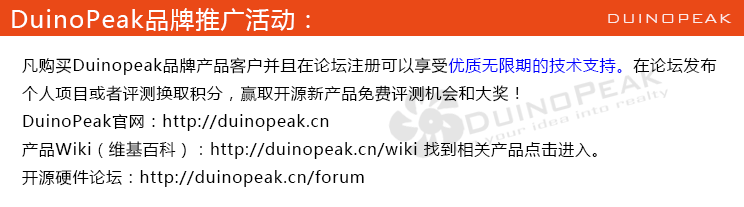
<style>
.page{position:relative;width:744px;height:207px;background:#ffffff}
.page>*{position:absolute;margin:0}
.t1{font:24px "MicrosoftYaHei";letter-spacing:0.05em;color:#ffffff}
.t2{font:18px "BankGothicBT-Light";letter-spacing:0.05em;color:#ffffff}
.t3{font:16px "MicrosoftYaHei";letter-spacing:0.05em;color:#000000}
.t4{font:16px "MicrosoftYaHei";letter-spacing:0.05em;color:#0000ff}
</style>
<div class="page">
<p class="t1" style="left:12px;top:8px;width:298px;height:23px">DuinoPeak品牌推广活动：</p>
<p class="t2" style="left:608px;top:14px;width:124px;height:9px;opacity:0.85">DUINOPEAK</p>
<p class="t3" style="left:22px;top:57px;width:695px;height:130px">凡购买Duinopeak品牌产品客户并且在论坛注册可以享受<span class="t4">优质无限期的技术支持。</span>在论坛发布<br>个人项目或者评测换取积分，赢取开源新产品免费评测机会和大奖！<br>DuinoPeak官网：http://duinopeak.cn<br>产品Wiki（维基百科）：http://duinopeak.cn/wiki 找到相关产品点击进入。<br>开源硬件论坛：http://duinopeak.cn/forum</p>
</div>
